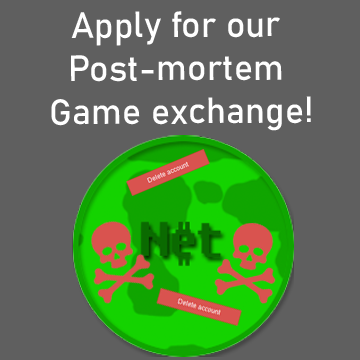
<style>
.page{position:relative;width:360px;height:360px;background:#5f5f5f}
.page>*{position:absolute;margin:0}
.t1{font:36px "Bahnschrift";color:#ffffff}
</style>
<div class="page">
<p class="t1" style="left:51px;top:11px;width:260px;height:120px;text-align:center">Apply for our <br>Post-mortem <br>Game exchange!</p>
</div>
